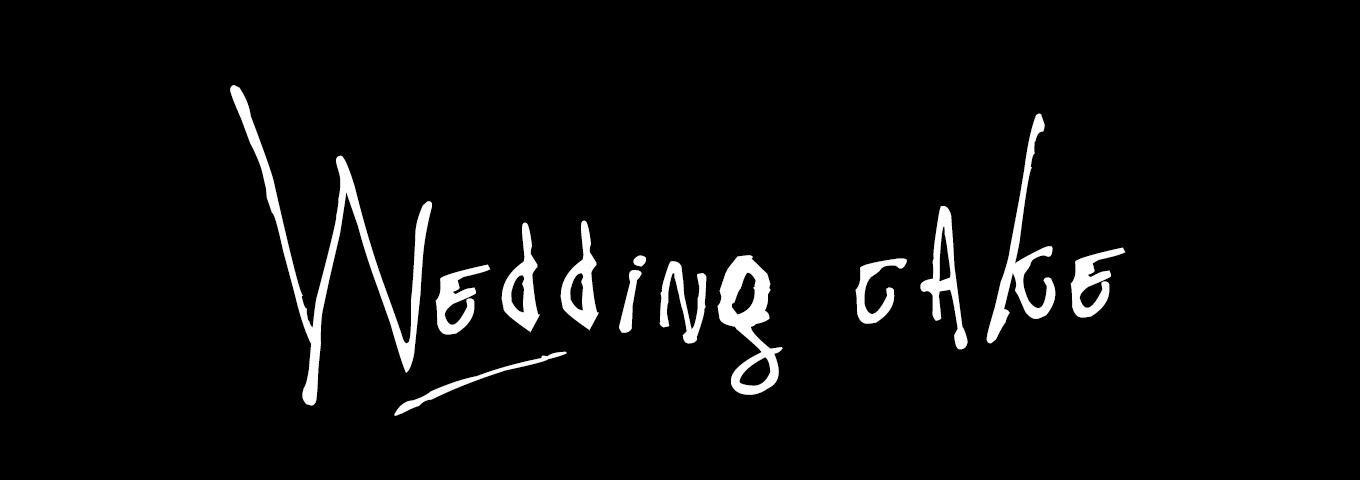
<style>
.page{position:relative;width:1360px;height:480px;background:#000000}
.page>*{position:absolute;margin:0}
.t1{font:340.5px "Pappo'sBluesBandOfficialFont";letter-spacing:0.024em;color:#ffffff;scale:1.12 1}
</style>
<div class="page">
<p class="t1" style="left:230px;top:85px;width:896px;height:331px;rotate:-2deg">Wedding cake</p>
</div>
